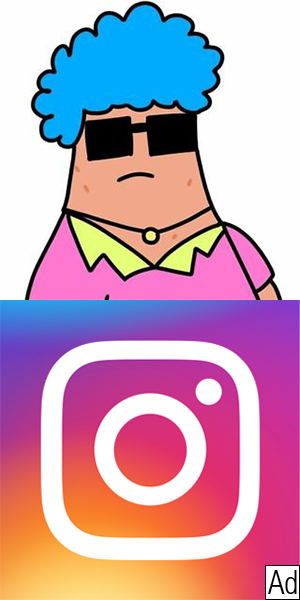
<style>
.page{position:relative;width:300px;height:600px}
.page>*{position:absolute;margin:0}
.t1{font:32.7px "ArialNovaCond-Light";color:#000000}
</style>
<div class="page">
<p class="t1" style="left:268px;top:570px;width:29px;height:24px">Ad</p>
</div>
